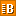
<style>
.page{position:relative;width:16px;height:16px;background:#ff8a00}
.page>*{position:absolute;margin:0}
.t1{font:14px "Fixedsys";letter-spacing:-0.04em;color:#ffffff}
.t2{font:14px "Fixedsys";letter-spacing:-0.04em}
</style>
<div class="page">
<p class="t1" style="left:7px;top:4px;width:6px;height:9px">B</p>
<p class="t2" style="left:8px;top:5px;width:6px;height:9px">B</p>
</div>
